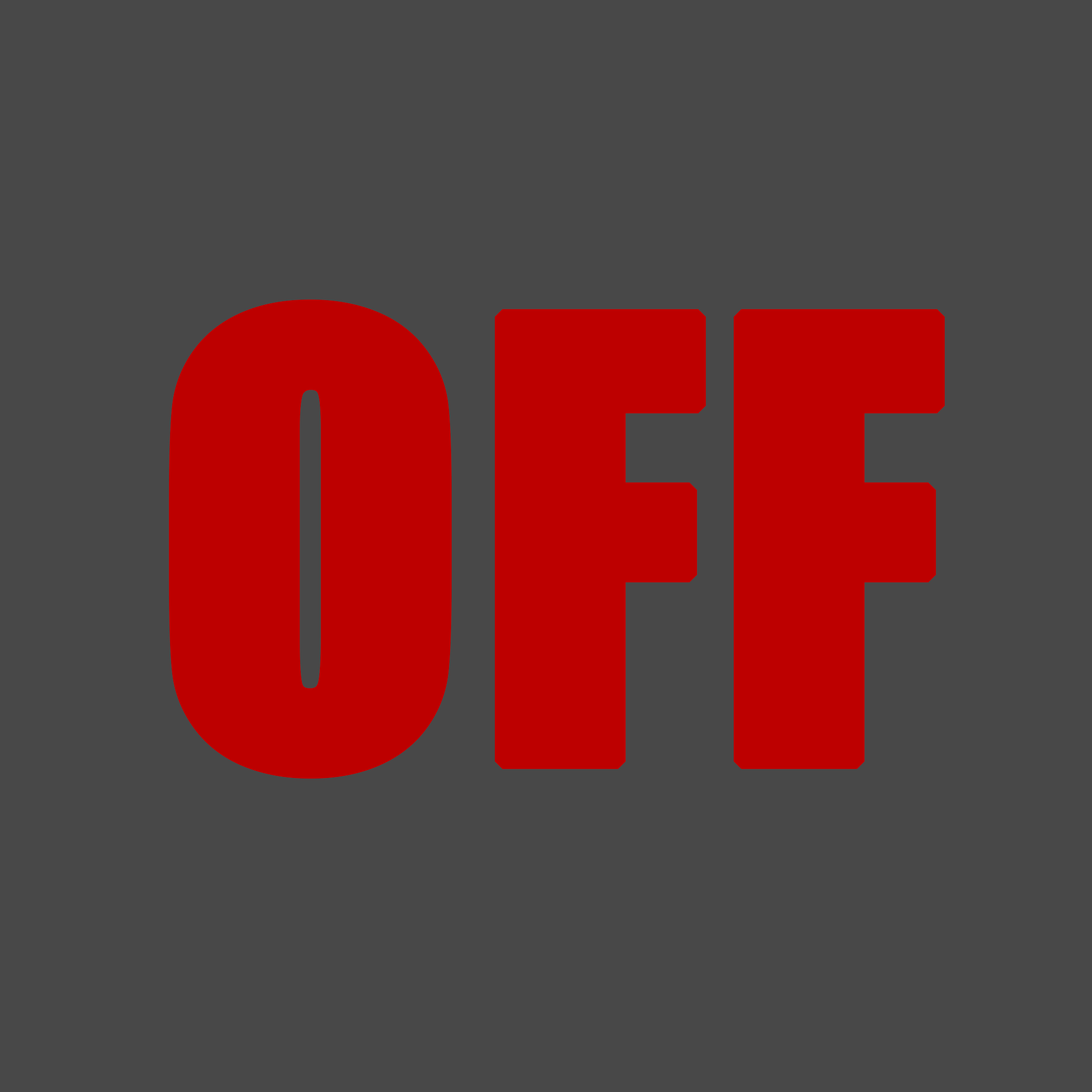
<style>
.page{position:relative;width:1092px;height:1092px;background:#484848}
.page>*{position:absolute;margin:0}
.t1{font:562.5px "Impact";color:#bd0000;font-weight:bold}
</style>
<div class="page">
<p class="t1" style="left:168px;top:299px;width:777px;height:480px">OFF</p>
</div>
